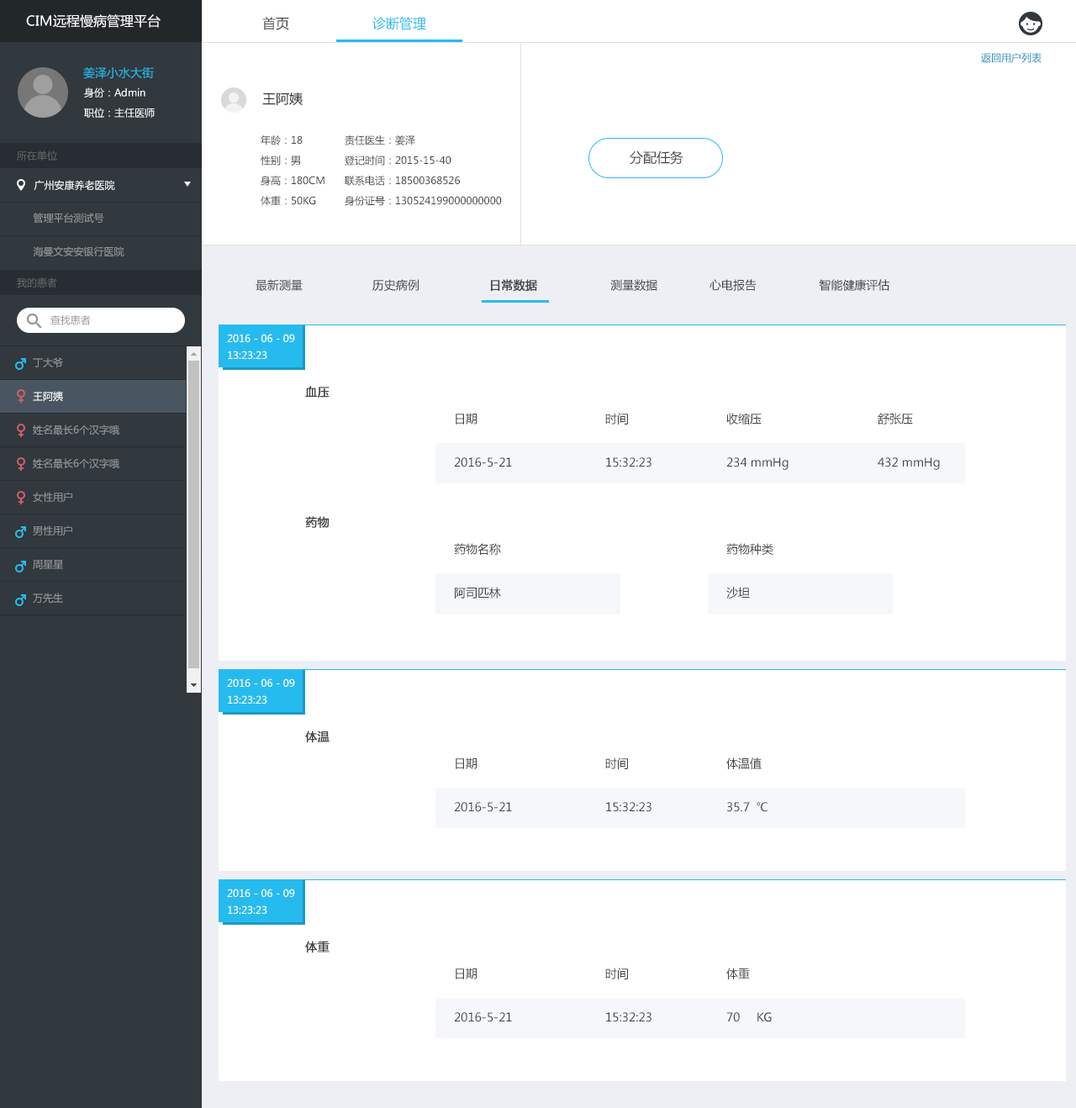
<style>
.page{position:relative;width:1076px;height:1108px;background:#ffffff}
.page>*{position:absolute;margin:0}
.t1{font:13.5px "MicrosoftYaHei";color:#ffffff}
.t2{font:13.5px "MicrosoftYaHei";color:#434343}
.t3{font:13.5px "MicrosoftYaHei";color:#26bbef}
.t4{font:10.1px "MicrosoftYaHei";color:#1790ba}
.t5{font:11.8px "MicrosoftYaHei";color:#26bbef}
.t6{font:10.1px "MicrosoftYaHei";color:#ffffff}
.t7{font:13.5px "MicrosoftYaHei";color:#333333}
.t8{font:10.1px/20.2px "MicrosoftYaHei";color:#434343}
.t9{font:10.1px "MicrosoftYaHei";color:#666666}
.t10{font:10.1px "MicrosoftYaHei";color:#999999}
.t11{font:11.8px "MicrosoftYaHei";color:#434343}
.t12{font:11.8px "MicrosoftYaHei";color:#434343;font-weight:bold}
.t13{font:10.1px/16.8px "MicrosoftYaHei";color:#ffffff}
.t14{font:10.1px/16.8px "MicrosoftYaHei";color:#999999}
</style>
<div class="page">
<p class="t1" style="left:26px;top:14px;width:135px;height:14px">CIM远程慢病管理平台</p>
<p class="t2" style="left:262px;top:17px;width:27px;height:13px">首页</p>
<p class="t3" style="left:372px;top:17px;width:54px;height:13px">诊断管理</p>
<p class="t4" style="left:981px;top:53px;width:61px;height:10px">返回用户列表</p>
<p class="t5" style="left:83px;top:66px;width:71px;height:13px">姜泽小水大街</p>
<p class="t6" style="left:84px;top:87px;width:61px;height:11px">身份：Admin</p>
<p class="t7" style="left:262px;top:92px;width:41px;height:13px">王阿姨</p>
<p class="t6" style="left:84px;top:108px;width:71px;height:10px">职位：主任医师</p>
<p class="t8" style="left:261px;top:135px;width:64px;height:71px">年龄：18 <br>性别：男<br>身高：180CM<br>体重：50KG</p>
<p class="t8" style="left:345px;top:135px;width:157px;height:71px">责任医生：姜泽<br>登记时间：2015-15-40<br>联系电话：18500368526<br>身份证号：130524199000000000</p>
<p class="t9" style="left:17px;top:150px;width:40px;height:11px">所在单位</p>
<p class="t2" style="left:630px;top:150px;width:54px;height:15px">分配任务</p>
<p class="t6" style="left:34px;top:180px;width:81px;height:11px">广州安康养老医院</p>
<p class="t10" style="left:33px;top:213px;width:71px;height:11px">管理平台测试号</p>
<p class="t10" style="left:33px;top:246px;width:91px;height:10px">海曼文安安银行医院</p>
<p class="t9" style="left:17px;top:277px;width:40px;height:11px">我的患者</p>
<p class="t11" style="left:256px;top:279px;width:634px;height:13px">最新测量                    历史病例                    <span class="t12">日常数据</span>                     测量数据  心电报告                  智能健康评估</p>
<p class="t10" style="left:50px;top:315px;width:41px;height:10px">查找患者</p>
<p class="t13" style="left:227px;top:334px;width:68px;height:25px">2016 - 06 - 09<br>13:23:23</p>
<p class="t14" style="left:33px;top:357px;width:86px;height:247px">丁大爷<br><br><span class="t13">王阿姨<br></span><br>姓名最长6个汉字哦<br><br>姓名最长6个汉字哦<br><br>女性用户<br><br>男性用户<br><br>周星星<br><br>万先生<br><br>男女图表请区分<br><br>男性用户<br><br>男性用户<br><br>女性用户<br><br>工程师</p>
<p class="t12" style="left:305px;top:386px;width:25px;height:12px">血压</p>
<p class="t11" style="left:456px;top:413px;width:457px;height:12px">日期     时间    收缩压    舒张压</p>
<p class="t11" style="left:454px;top:457px;width:486px;height:13px">2016-5-21    15:32:23   234 mmHg   432 mmHg</p>
<p class="t12" style="left:305px;top:516px;width:25px;height:12px">药物</p>
<p class="t11" style="left:454px;top:543px;width:319px;height:12px">药物名称         药物种类</p>
<p class="t11" style="left:455px;top:587px;width:295px;height:12px">阿司匹林         沙坦</p>
<p class="t13" style="left:227px;top:678px;width:68px;height:26px">2016 - 06 - 09<br>13:23:23</p>
<p class="t12" style="left:305px;top:731px;width:25px;height:12px">体温</p>
<p class="t11" style="left:456px;top:757px;width:306px;height:12px">日期     时间    体温值</p>
<p class="t11" style="left:454px;top:802px;width:314px;height:10px">2016-5-21    15:32:23   35.7 ℃</p>
<p class="t13" style="left:227px;top:889px;width:68px;height:25px">2016 - 06 - 09<br>13:23:23</p>
<p class="t12" style="left:305px;top:941px;width:25px;height:12px">体重</p>
<p class="t11" style="left:456px;top:968px;width:294px;height:11px">日期     时间    体重</p>
<p class="t11" style="left:454px;top:1012px;width:318px;height:10px">2016-5-21    15:32:23   70 KG</p>
</div>
